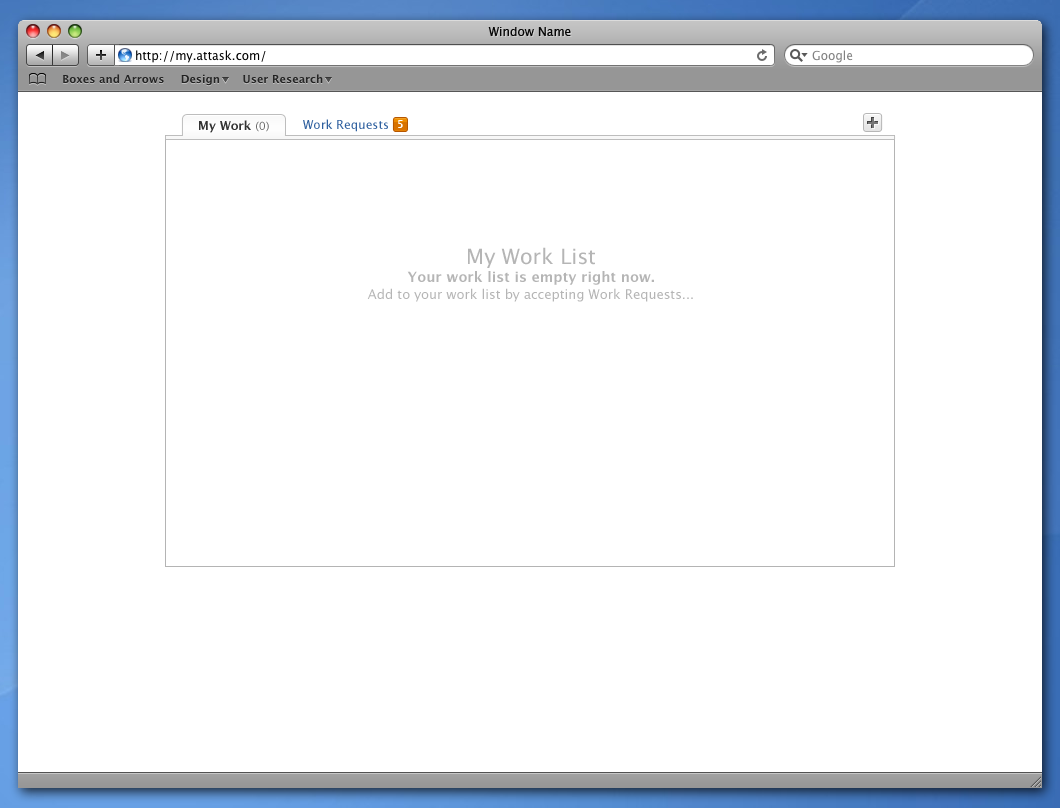
<style>
.page{position:relative;width:1060px;height:808px;background:#ffffff}
.page>*{position:absolute;margin:0}
.t1{font:12px "LucidaGrande";color:#080808}
.t2{font:12px "LucidaGrande-Bold";color:#333333}
.t3{font:11px "LucidaGrande";color:#686868}
.t4{font:12px "LucidaGrande";color:#2f609f}
.t5{font:10px "LucidaGrande-Bold";color:#ffffff}
.t6{font:13px/17px "LucidaGrande";color:#b5b5b5}
.t7{font:21px/18px "LucidaGrande";color:#b5b5b5}
.t8{font:14px/18px "LucidaGrande-Bold";color:#b5b5b5}
.t9{font:14px/17px "LucidaGrande-Bold";color:#b5b5b5}
</style>
<div class="page">
<p class="t1" style="left:488px;top:27px;width:83px;height:9px">Window Name</p>
<p class="t2" style="left:199px;top:120px;width:70px;height:13px">My Work <span class="t3">(0)</span></p>
<p class="t4" style="left:303px;top:119px;width:85px;height:13px">Work Requests</p>
<p class="t5" style="left:398px;top:120px;width:5px;height:8px">5</p>
<p class="t6" style="left:367px;top:247px;width:326px;height:55px;text-align:center"><span class="t7">My Work List<br></span><span class="t8">Your work lis</span><span class="t9">t is empty right now.<br></span>Add to your work list by accepting Work Requests...</p>
</div>
